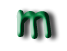
<style>
.page{position:relative;width:67px;height:51px;background:#ffffff}
.page>*{position:absolute;margin:0}
.t1{font:48px "ComicSansMS-Bold"}
</style>
<div class="page">
<p class="t1" style="left:16px;top:9px;width:36px;height:30px">m</p>
</div>
